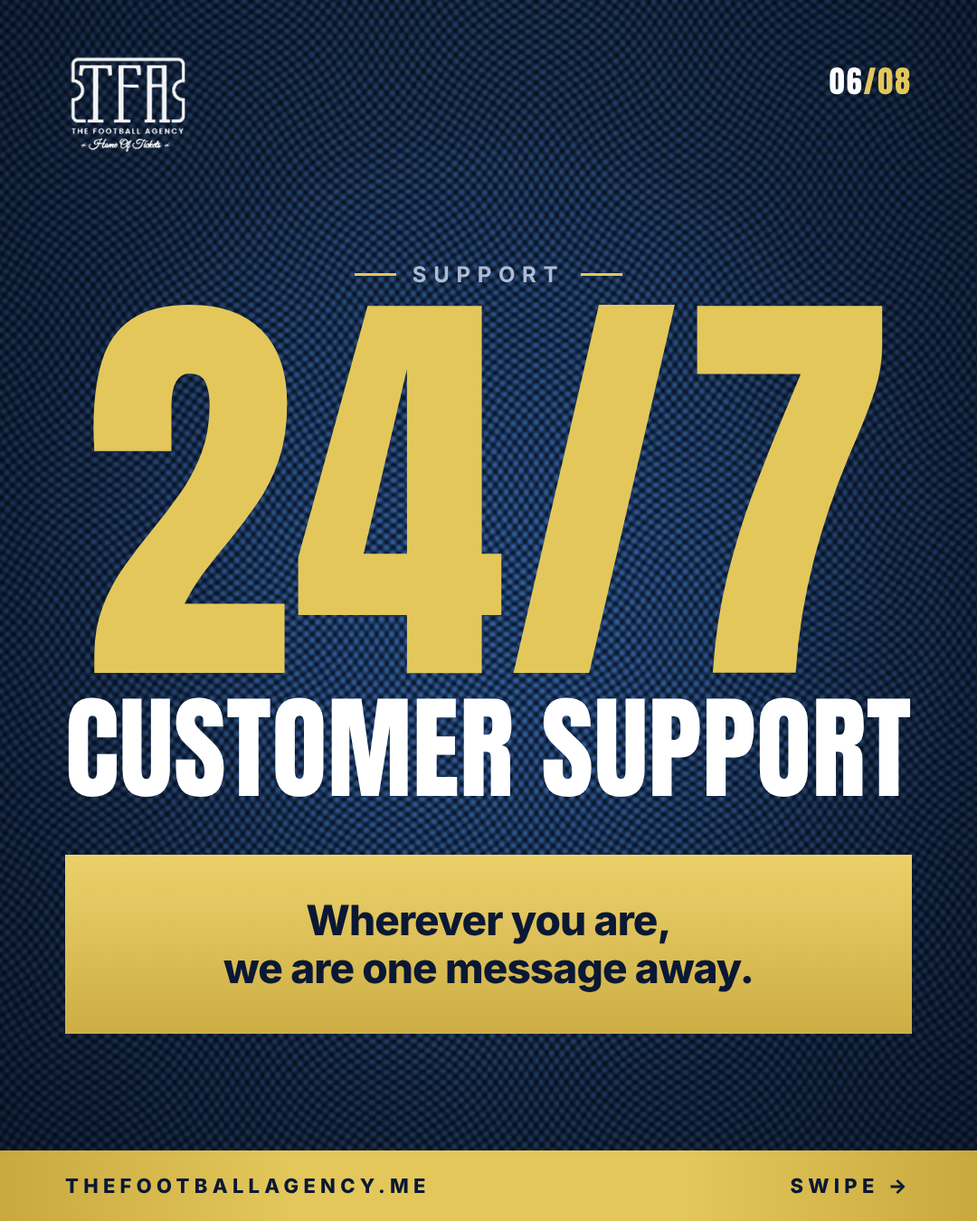
<style>
.page{position:relative;width:977px;height:1221px}
.page>*{position:absolute;margin:0}
.t1{font:30.7px "Anton-Regular";letter-spacing:0.06em;color:#e3c75a}
.t2{font:30.7px "Anton-Regular";letter-spacing:0.06em;color:#ffffff}
.t3{font:21.7px "Inter-Bold";letter-spacing:0.32em;color:#aebbd3}
.t4{font:426.6px "Anton-Regular";letter-spacing:0.005em;color:#e3c75a}
.t5{font:113.2px "Anton-Regular";letter-spacing:0.005em;color:#ffffff}
.t6{font:41.6px/47.8px "Inter-ExtraBold";letter-spacing:-0.02em;color:#0a1834}
.t7{font:19.9px "Inter-ExtraBold";letter-spacing:0.24em;color:#0a1834}
</style>
<div class="page">
<p class="t1" style="left:829px;top:67px;width:81px;height:28px"><span class="t2">06</span>/08</p>
<p class="t3" style="left:412px;top:266px;width:145px;height:17px">SUPPORT</p>
<p class="t4" style="left:93px;top:305px;width:790px;height:369px">24/7</p>
<p class="t5" style="left:68px;top:697px;width:843px;height:100px">CUSTOMER SUPPORT</p>
<p class="t6" style="left:223px;top:904px;width:529px;height:88px;text-align:center">Wherever you are,<br>we are one message away.</p>
<p class="t7" style="left:65px;top:1177px;width:360px;height:17px">THEFOOTBALLAGENCY.ME</p>
<p class="t7" style="left:790px;top:1177px;width:115px;height:17px">SWIPE →</p>
</div>
